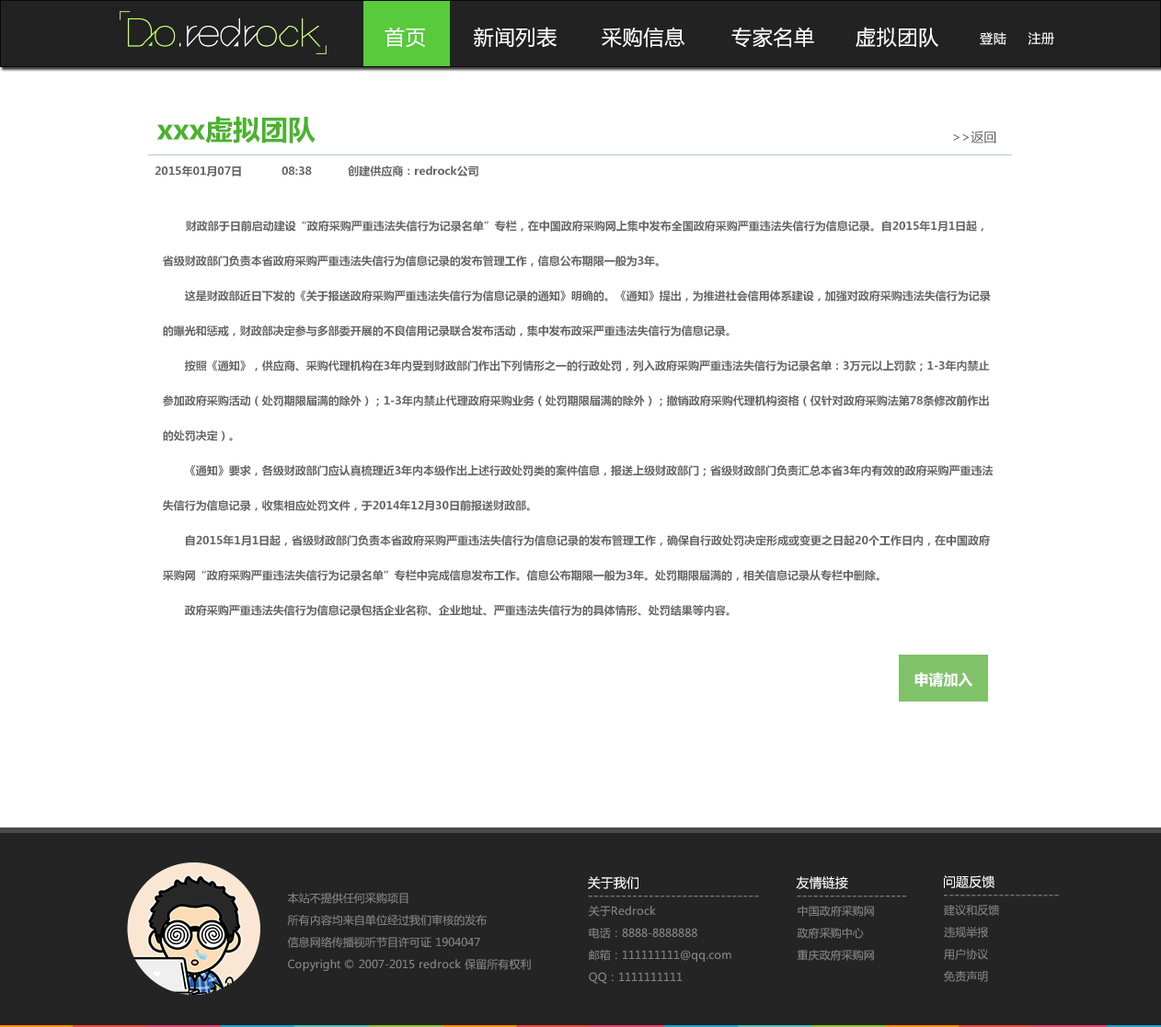
<style>
.page{position:relative;width:1161px;height:1027px;background:#ffffff}
.page>*{position:absolute;margin:0}
.t1{font:20.2px "MicrosoftYaHei";letter-spacing:0.035em;color:#ffffff}
.t2{font:12.9px "MicrosoftYaHei";letter-spacing:0.035em;color:#ffffff}
.t3{font:27.6px "MicrosoftYaHei-Bold";color:#48b42c}
.t4{font:12.9px "MicrosoftYaHei";color:#5b5b5b}
.t5{font:11px "MicrosoftYaHei-Bold";color:#666666}
.t6{font:11px/34.9px "MicrosoftYaHei-Bold";color:#666666}
.t7{font:14.7px "MicrosoftYaHei-Bold";color:#ffffff}
.t8{font:12.9px "MicrosoftYaHei";color:#ffffff}
.t9{font:11px/22.1px "MicrosoftYaHei";color:#858585}
.t10{font:12.9px "MicrosoftYaHei";color:#858585}
</style>
<div class="page">
<p class="t1" style="left:384px;top:27px;width:41px;height:21px">首页</p>
<p class="t1" style="left:474px;top:27px;width:82px;height:21px">新闻列表</p>
<p class="t1" style="left:602px;top:27px;width:83px;height:21px">采购信息</p>
<p class="t1" style="left:731px;top:27px;width:83px;height:21px">专家名单</p>
<p class="t1" style="left:855px;top:27px;width:83px;height:21px">虚拟团队</p>
<p class="t2" style="left:980px;top:32px;width:74px;height:13px">登陆     注册</p>
<p class="t3" style="left:156px;top:116px;width:159px;height:27px">xxx虚拟团队</p>
<p class="t4" style="left:953px;top:131px;width:43px;height:12px">&gt;&gt;返回</p>
<p class="t5" style="left:155px;top:166px;width:323px;height:11px">2015年01月07日            08:38           创建供应商：redrock公司</p>
<p class="t6" style="left:163px;top:220px;width:830px;height:396px">财政部于日前启动建设“政府采购严重违法失信行为记录名单”专栏，在中国政府采购网上集中发布全国政府采购严重违法失信行为信息记录。自2015年1月1日起，<br>省级财政部门负责本省政府采购严重违法失信行为信息记录的发布管理工作，信息公布期限一般为3年。<br>　　这是财政部近日下发的《关于报送政府采购严重违法失信行为信息记录的通知》明确的。《通知》提出，为推进社会信用体系建设，加强对政府采购违法失信行为记录<br>的曝光和惩戒，财政部决定参与多部委开展的不良信用记录联合发布活动，集中发布政采严重违法失信行为信息记录。<br>　　按照《通知》，供应商、采购代理机构在3年内受到财政部门作出下列情形之一的行政处罚，列入政府采购严重违法失信行为记录名单：3万元以上罚款；1-3年内禁止<br>参加政府采购活动（处罚期限届满的除外）；1-3年内禁止代理政府采购业务（处罚期限届满的除外）；撤销政府采购代理机构资格（仅针对政府采购法第78条修改前作出<br>的处罚决定）。<br>　　《通知》要求，各级财政部门应认真梳理近3年内本级作出上述行政处罚类的案件信息，报送上级财政部门；省级财政部门负责汇总本省3年内有效的政府采购严重违法<br>失信行为信息记录，收集相应处罚文件，于2014年12月30日前报送财政部。<br>　　自2015年1月1日起，省级财政部门负责本省政府采购严重违法失信行为信息记录的发布管理工作，确保自行政处罚决定形成或变更之日起20个工作日内，在中国政府<br>采购网“政府采购严重违法失信行为记录名单”专栏中完成信息发布工作。信息公布期限一般为3年。处罚期限届满的，相关信息记录从专栏中删除。<br>　　政府采购严重违法失信行为信息记录包括企业名称、企业地址、严重违法失信行为的具体情形、处罚结果等内容。</p>
<p class="t7" style="left:914px;top:672px;width:59px;height:15px">申请加入</p>
<p class="t8" style="left:588px;top:877px;width:50px;height:12px">关于我们</p>
<p class="t8" style="left:796px;top:877px;width:52px;height:12px">友情链接</p>
<p class="t8" style="left:944px;top:876px;width:50px;height:12px">问题反馈</p>
<p class="t9" style="left:287px;top:893px;width:244px;height:78px">本站不提供任何采购项目<br>所有内容均来自单位经过我们审核的发布<br>信息网络传播视听节目许可证 1904047<br>Copyright © 2007-2015 redrock 保留所有权利</p>
<p class="t10" style="left:588px;top:896px;width:171px;height:2px">-------------------------------</p>
<p class="t9" style="left:589px;top:906px;width:142px;height:78px">关于Redrock<br>电话：8888-8888888<br>邮箱：111111111@qq.com<br>QQ：1111111111</p>
<p class="t10" style="left:796px;top:896px;width:110px;height:2px">--------------------</p>
<p class="t9" style="left:796px;top:906px;width:78px;height:55px">中国政府采购网<br>政府采购中心<br>重庆政府采购网</p>
<p class="t10" style="left:944px;top:895px;width:115px;height:2px">---------------------</p>
<p class="t9" style="left:944px;top:905px;width:55px;height:77px">建议和反馈<br>违规举报<br>用户协议<br>免责声明</p>
</div>
